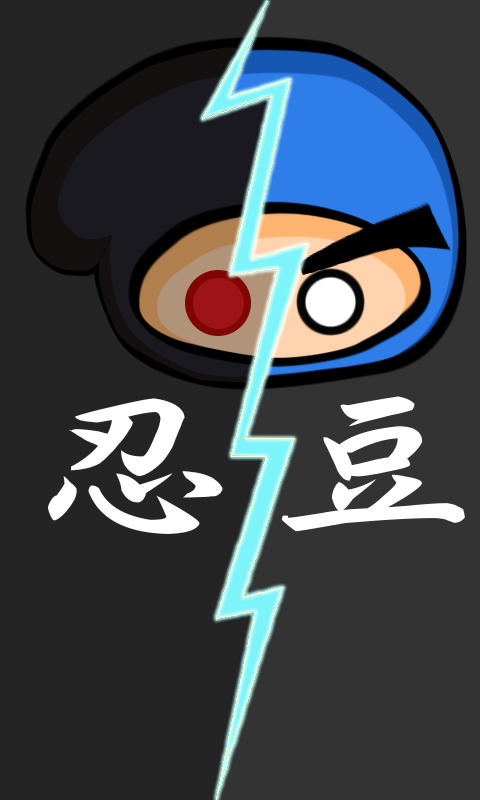
<style>
.page{position:relative;width:480px;height:800px;background:#242424}
.page>*{position:absolute;margin:0}
.t1{font:175px "DFXingKai-W5-WIN-BF";color:#ffffff;scale:1.37 1}
</style>
<div class="page">
<p class="t1" style="left:48px;top:396px;width:417px;height:138px">忍豆</p>
</div>
